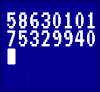
<style>
.page{position:relative;width:100px;height:92px;background:#030092}
.page>*{position:absolute;margin:0}
.t1{font:27px/18px "VT323-Regular";letter-spacing:0.005em;color:#ffffff}
</style>
<div class="page">
<p class="t1" style="left:7px;top:12px;width:88px;height:35px">58630101<br>75329940</p>
</div>
